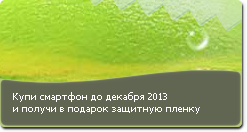
<style>
.page{position:relative;width:247px;height:132px;background:#616653}
.page>*{position:absolute;margin:0}
.t1{font:10px "Tahoma";color:#ffffff}
</style>
<div class="page">
<p class="t1" style="left:13px;top:92px;width:187px;height:22px">Купи смартфон до декабря 2013 <br>и получи в подарок защитную пленку</p>
</div>
